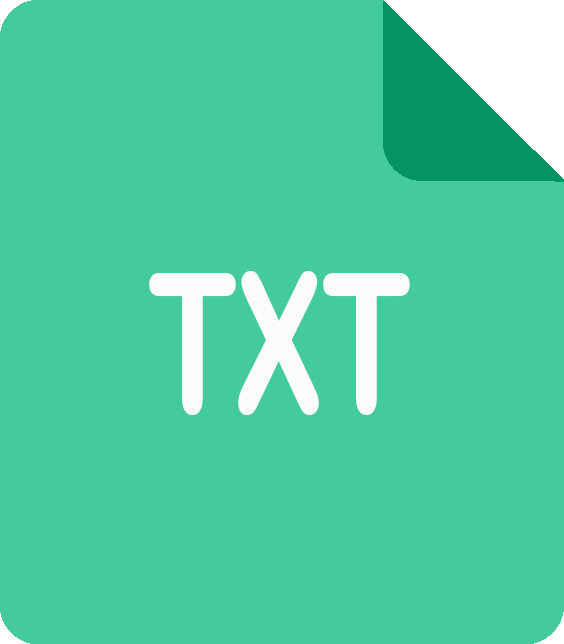
<style>
.page{position:relative;width:564px;height:644px;background:#44cb9d}
.page>*{position:absolute;margin:0}
.t1{font:195.5px "ArialRoundedMTBold";color:#fafbfa;scale:0.72 1}
</style>
<div class="page">
<p class="t1" style="left:149px;top:271px;width:261px;height:144px">TXT</p>
</div>
